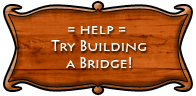
<style>
.page{position:relative;width:196px;height:96px;background:#ffffff}
.page>*{position:absolute;margin:0}
.t1{font:14px "Pericles";color:#ffffff}
</style>
<div class="page">
<p class="t1" style="left:51px;top:26px;width:95px;height:42px;text-align:center">= help = <br>Try Building<br>a Bridge!</p>
</div>
